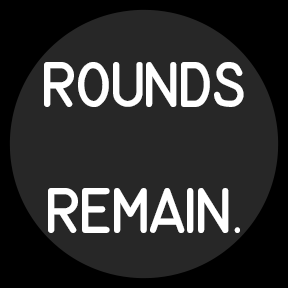
<style>
.page{position:relative;width:288px;height:288px;background:#272727}
.page>*{position:absolute;margin:0}
.t1{font:45px "MS-33558-Regular";letter-spacing:-0.04em;color:#ffffff}
.t2{font:45px "MyriadPro-Regular";letter-spacing:-0.04em;color:#ffffff}
</style>
<div class="page">
<p class="t1" style="left:44px;top:62px;width:200px;height:45px">ROUNDS</p>
<p class="t1" style="left:48px;top:188px;width:192px;height:45px">remain<span class="t2">.</span></p>
</div>
